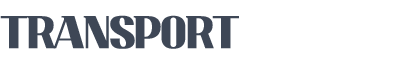
<style>
.page{position:relative;width:400px;height:66px;background:#ffffff}
.page>*{position:absolute;margin:0}
.t1{font:40px "KoreanBDCS-R";letter-spacing:-0.05em;color:#3e4756}
</style>
<div class="page">
<p class="t1" style="left:0px;top:15px;width:239px;height:34px">TRANSPORT</p>
</div>
